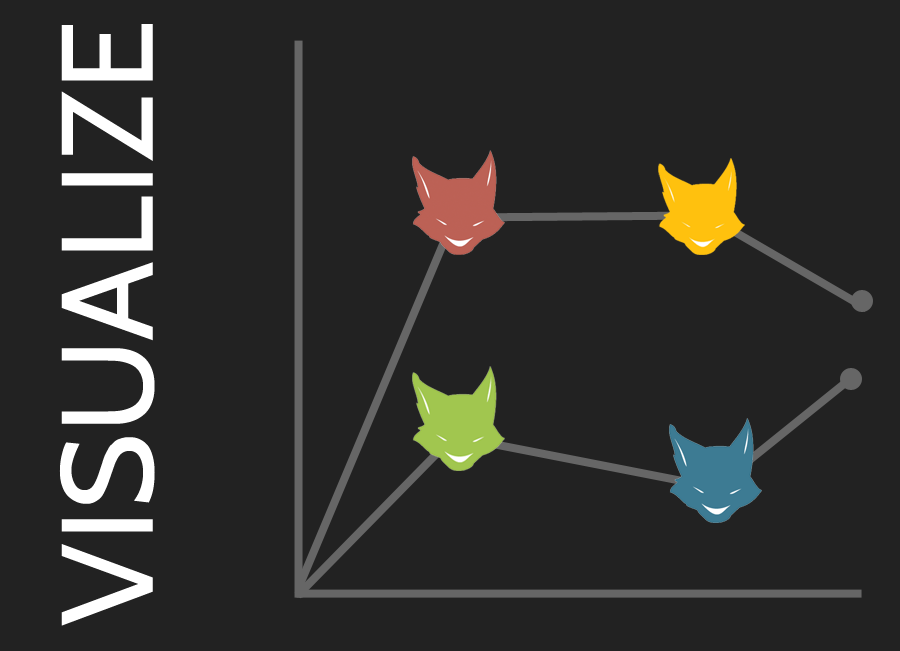
<style>
.page{position:relative;width:900px;height:651px;background:#222222}
.page>*{position:absolute;margin:0}
.t1{font:130px "Cabin-Regular";color:#ffffff}
</style>
<div class="page">
<p class="t1" style="left:59px;top:24px;width:96px;height:602px;rotate:-90deg">VISUALIZE</p>
</div>
